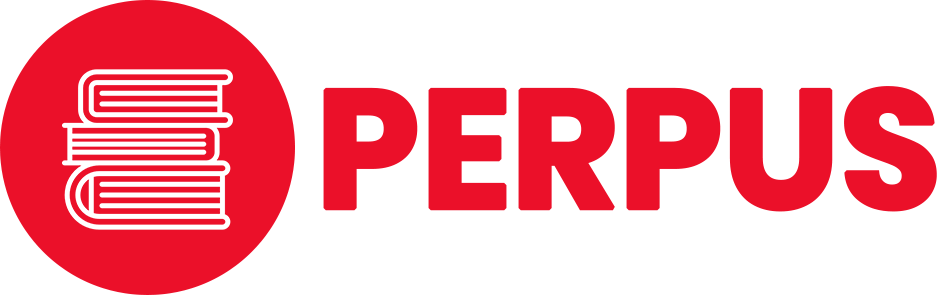
<style>
.page{position:relative;width:942px;height:295px;background:#ffffff}
.page>*{position:absolute;margin:0}
.t1{font:166.7px "Poppins-Bold";letter-spacing:-0.02em;color:#eb1029;font-weight:bold}
</style>
<div class="page">
<p class="t1" style="left:323px;top:86px;width:614px;height:126px">PERPUS</p>
</div>
